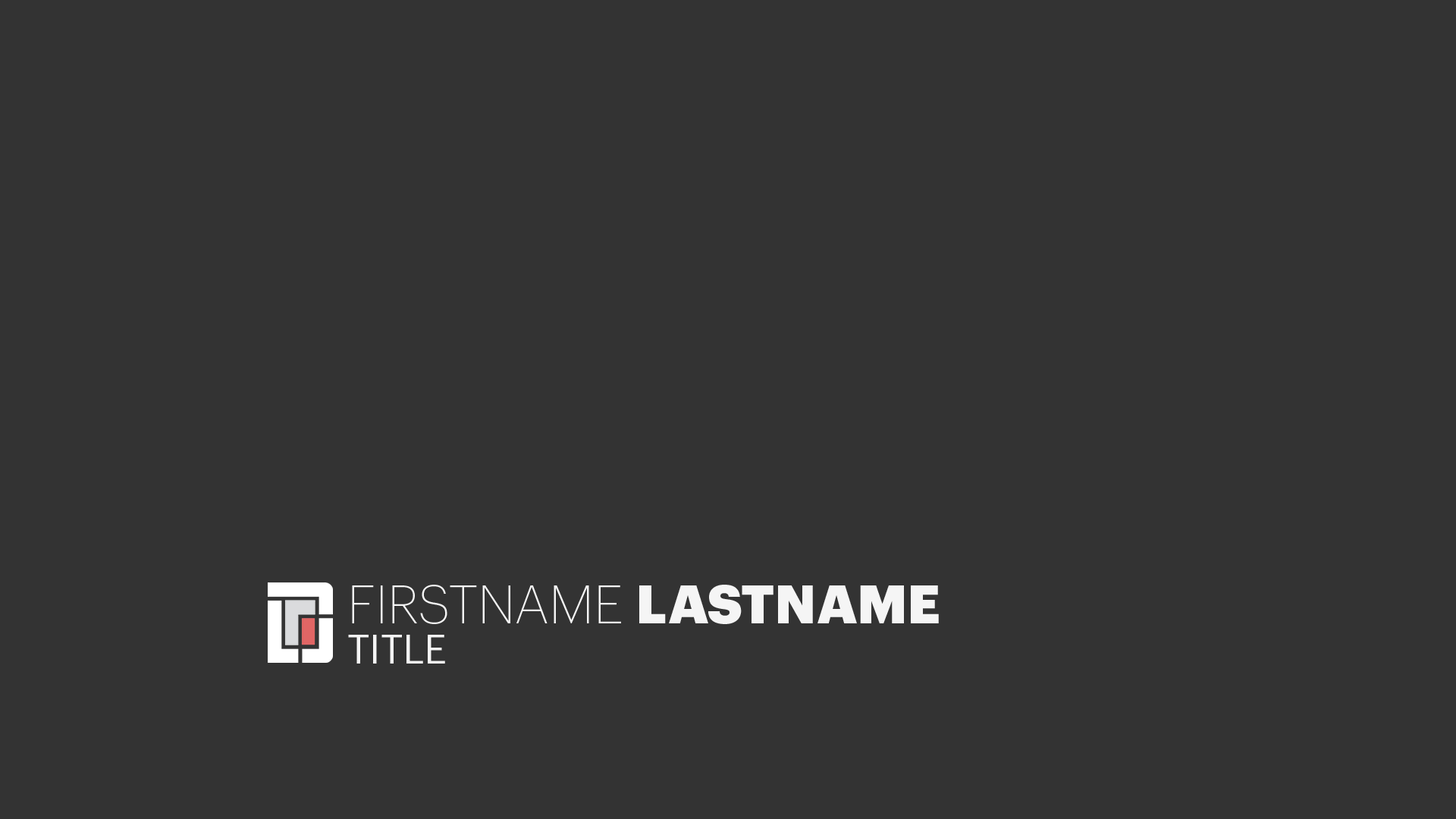
<style>
.page{position:relative;width:1456px;height:819px;background:#333333}
.page>*{position:absolute;margin:0}
.t1{font:53.1px/39.8px "Graphik-Extralight";color:#f5f5f5;text-transform:uppercase}
.t2{font:53.1px/39.8px "Graphik-Black";color:#f5f5f5;text-transform:uppercase}
.t3{font:39.8px/39.8px "Graphik-Regular";color:#f5f5f5;text-transform:uppercase}
</style>
<div class="page">
<p class="t1" style="left:348px;top:585px;width:591px;height:79px">firstname <span class="t2">lastname<br></span><span class="t3">title</span></p>
</div>
